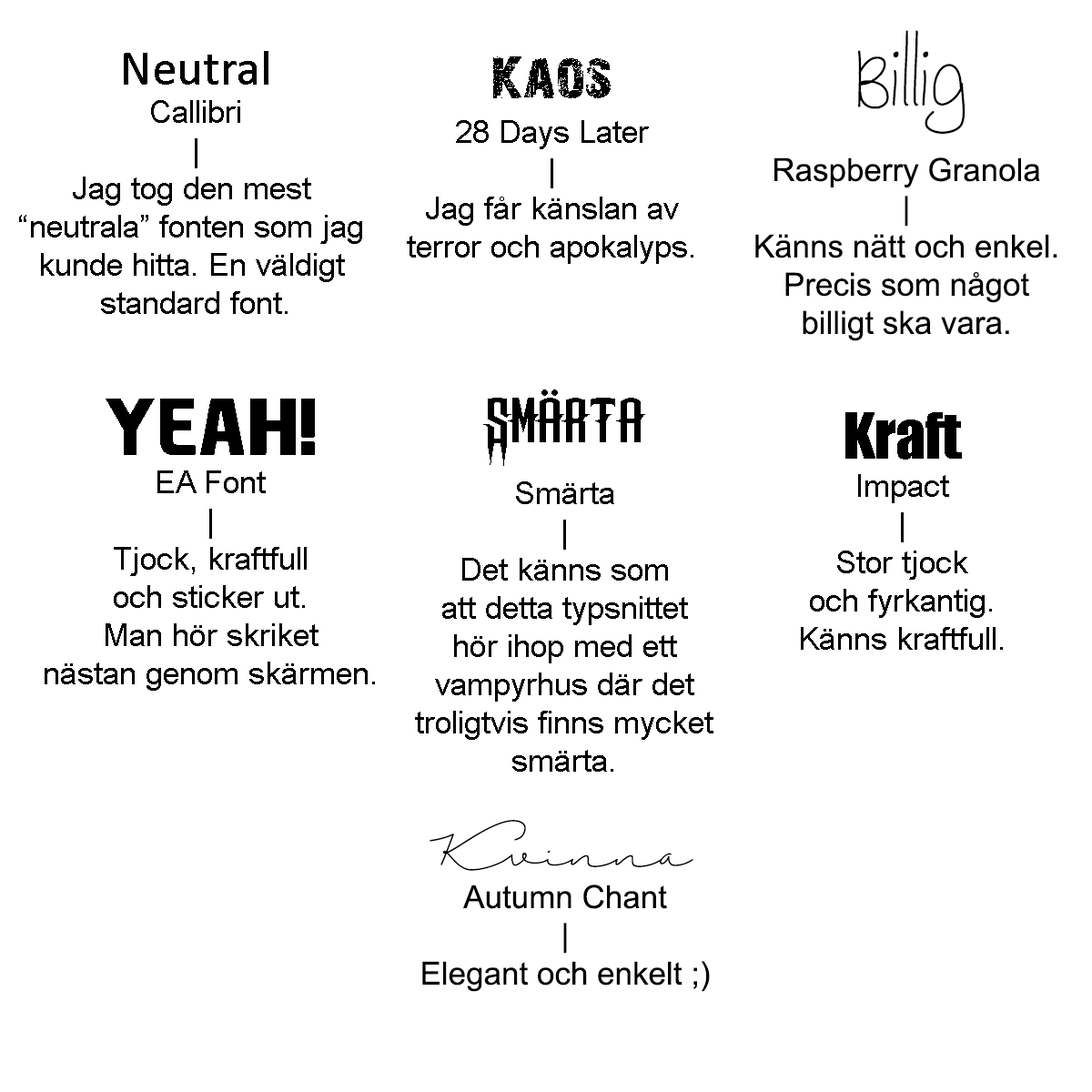
<style>
.page{position:relative;width:1092px;height:1092px;background:#ffffff}
.page>*{position:absolute;margin:0}
.t1{font:31.8px "ArialMT";color:#000000}
.t2{font:77.3px "raspberrygranola";color:#000000}
.t3{font:31.8px "raspberrygranola";color:#000000}
.t4{font:50px "Calibri";color:#000000}
.t5{font:59.1px "28DaysLater";color:#000000}
.t6{font:77.3px "ChopschopS-Regular";color:#000000}
.t7{font:77.3px "EASPORTS";color:#000000}
.t8{font:59.1px "Impact";color:#000000}
.t9{font:40.9px "AutumnChant";color:#000000}
</style>
<div class="page">
<p class="t1" style="left:755px;top:30px;width:302px;height:311px;text-align:center"><span class="t2">Billig</span><span class="t3"><br><br></span>Raspberry Granola<br>|<br>Känns nätt och enkel.<br>Precis som något<br>billigt ska vara.</p>
<p class="t1" style="left:19px;top:51px;width:343px;height:263px;text-align:center"><span class="t4">Neutral<br></span>Callibri<br>|<br>Jag tog den mest <br>“neutrala” fonten som jag <br>kunde hitta. En väldigt <br>standard font.</p>
<p class="t1" style="left:407px;top:56px;width:286px;height:208px;text-align:center"><span class="t5">Kaos<br></span>28 Days Later<br>|<br>Jag får känslan av<br>terror och apokalyps.</p>
<p class="t1" style="left:415px;top:389px;width:298px;height:383px;text-align:center"><span class="t6">Smärta<br></span>Smärta<br>|<br>Det känns som<br>att detta typsnittet<br>hör ihop med ett<br>vampyrhus där det<br>troligtvis finns mycket<br>smärta.</p>
<p class="t1" style="left:45px;top:399px;width:330px;height:292px;text-align:center"><span class="t7">Yeah!<br></span>EA Font<br>|<br>Tjock, kraftfull<br>och sticker ut.<br>Man hör skriket<br>nästan genom skärmen.</p>
<p class="t1" style="left:801px;top:412px;width:202px;height:238px;text-align:center"><span class="t8">Kraft<br></span>Impact<br>|<br>Stor tjock<br>och fyrkantig.<br>Känns kraftfull.</p>
<p class="t1" style="left:422px;top:820px;width:288px;height:172px;text-align:center"><span class="t9">Kvinna<br></span>Autumn Chant<br>|<br>Elegant och enkelt ;)</p>
</div>
